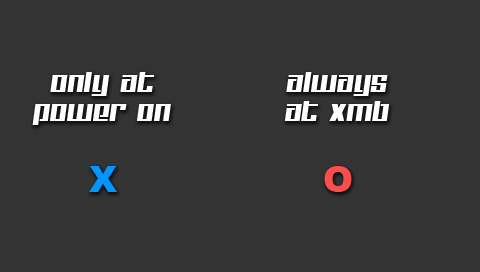
<style>
.page{position:relative;width:480px;height:272px;background:#333333}
.page>*{position:absolute;margin:0}
.t1{font:24px "Kitchenpolice";color:#ffffff}
.t2{font:36px "Arial-Black";color:#0096ff}
.t3{font:36px "Arial-Black";color:#fa4e4e}
</style>
<div class="page">
<p class="t1" style="left:32px;top:72px;width:139px;height:120px;text-align:center">only at<br>power on<br><br><span class="t2">X</span></p>
<p class="t1" style="left:284px;top:72px;width:106px;height:120px;text-align:center">always at xmb<br><br><span class="t3">O</span></p>
</div>
